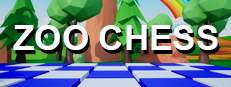
<style>
.page{position:relative;width:231px;height:87px}
.page>*{position:absolute;margin:0}
.t1{font:35px "Arial-BoldMT";color:#ffffff}
</style>
<div class="page">
<p class="t1" style="left:13px;top:25px;width:205px;height:25px">ZOO CHESS</p>
</div>
